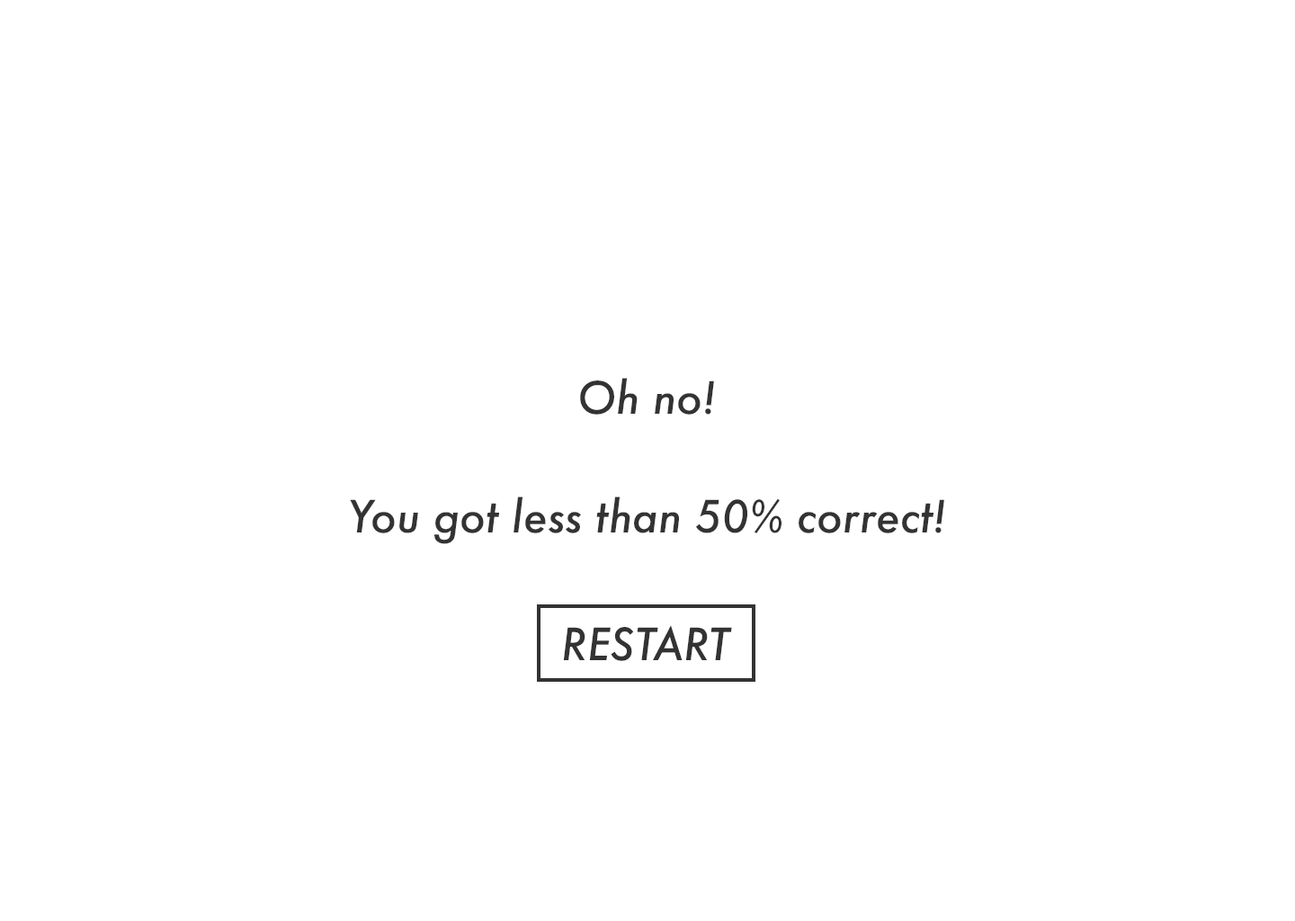
<style>
.page{position:relative;width:1295px;height:921px;background:#ffffff}
.page>*{position:absolute;margin:0}
.t1{font:43.2px "Futura-MediumItalic";color:#333333}
</style>
<div class="page">
<p class="t1" style="left:580px;top:378px;width:134px;height:37px">Oh no!</p>
<p class="t1" style="left:350px;top:496px;width:594px;height:48px">You got less than 50% correct!</p>
<p class="t1" style="left:563px;top:625px;width:169px;height:36px">RESTART</p>
</div>
